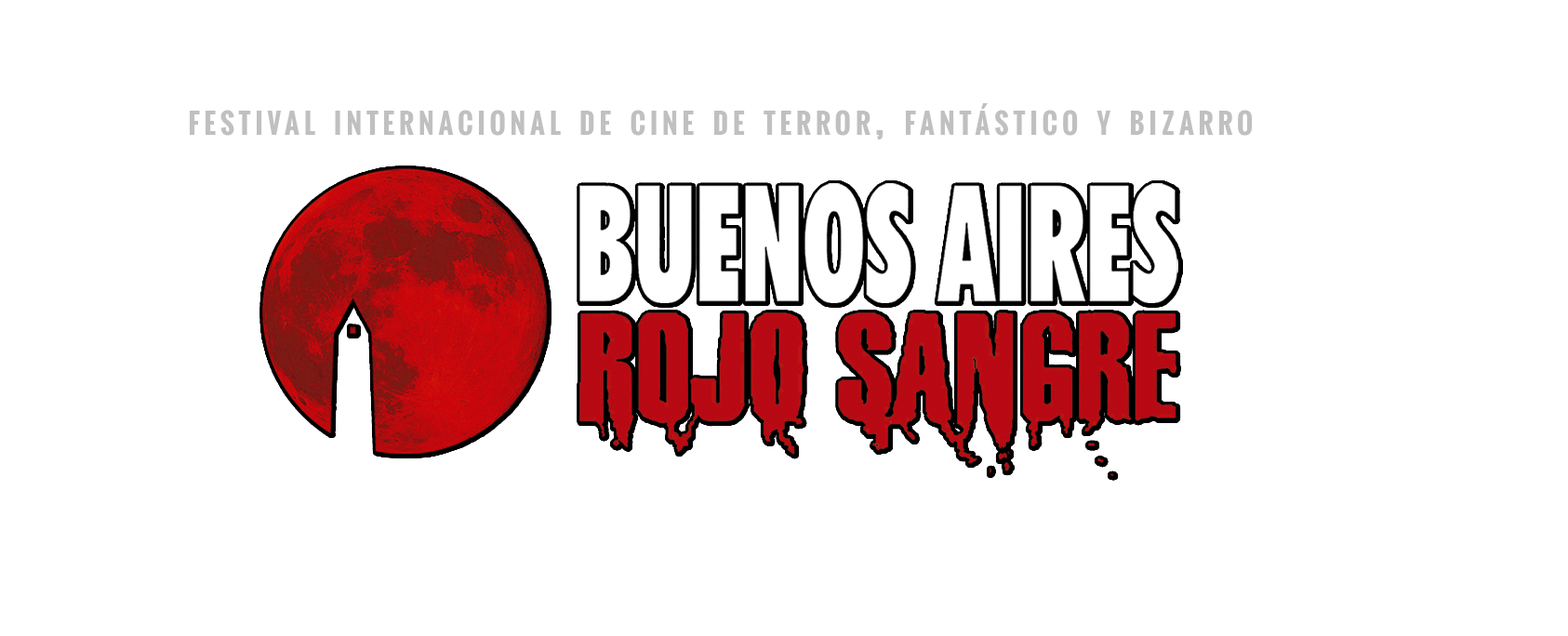
<style>
.page{position:relative;width:1568px;height:636px;background:#ffffff}
.page>*{position:absolute;margin:0}
.t1{font:39.1px "Oswald-Bold";letter-spacing:0.18em;color:#c0c0c0;font-variant:small-caps}
</style>
<div class="page">
<p class="t1" style="left:190px;top:103px;width:1063px;height:37px">festival internacional de cine de terror, fantástico y bizarro</p>
</div>
